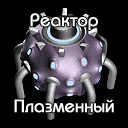
<style>
.page{position:relative;width:128px;height:128px;background:#000000}
.page>*{position:absolute;margin:0}
.t1{font:18px "BauhausC-Medium";color:#ffffff;font-weight:bold}
</style>
<div class="page">
<p class="t1" style="left:30px;top:13px;width:68px;height:17px">Реактор</p>
<p class="t1" style="left:14px;top:99px;width:100px;height:14px">Плазменный</p>
</div>
